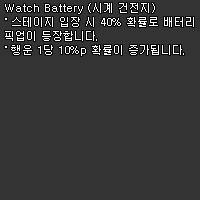
<style>
.page{position:relative;width:200px;height:200px;background:#333333}
.page>*{position:absolute;margin:0}
.t1{font:11px/14px "Dotum";color:#ffffff}
</style>
<div class="page">
<p class="t1" style="left:5px;top:3px;width:189px;height:53px">Watch Battery (시계 건전지)<br>˚ 스테이지 입장 시 40% 확률로 배터리<br>픽업이 등장합니다.<br>˚ 행운 1당 10%p 확률이 증가됩니다.</p>
</div>
